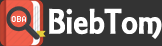
<style>
.page{position:relative;width:162px;height:46px;background:#333333}
.page>*{position:absolute;margin:0}
.t1{font:11px "8514oem";color:#ffffff}
.t2{font:38px "ARESSENCE";color:#ffffff}
</style>
<div class="page">
<p class="t1" style="left:11px;top:16px;width:15px;height:6px">OBA</p>
<p class="t2" style="left:49px;top:8px;width:113px;height:31px">BiebTom</p>
</div>
